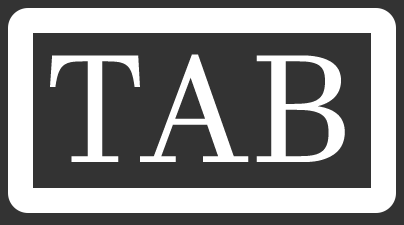
<style>
.page{position:relative;width:404px;height:225px;background:#333333}
.page>*{position:absolute;margin:0}
.t1{font:150px "JavaneseText";letter-spacing:0.035em;color:#ffffff}
</style>
<div class="page">
<p class="t1" style="left:50px;top:54px;width:295px;height:108px">TAB</p>
</div>
